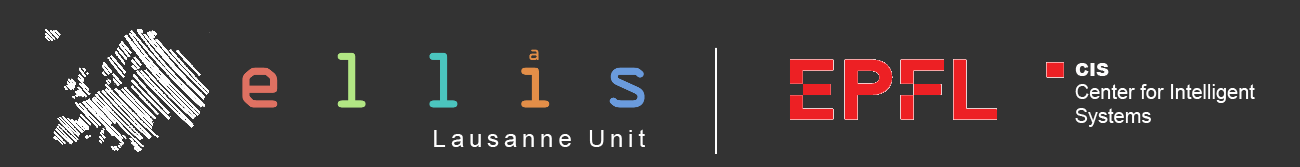
<style>
.page{position:relative;width:1300px;height:167px;background:#333333}
.page>*{position:absolute;margin:0}
.t1{font:18px "Arial-Black";color:#fdfcfc}
.t2{font:20px/24px "ArialMT";color:#ffffff}
.t3{font:24px "ArialMT";letter-spacing:0.2em;color:#ffffff}
</style>
<div class="page">
<p class="t1" style="left:1075px;top:63px;width:34px;height:13px">CIS</p>
<p class="t2" style="left:1075px;top:84px;width:180px;height:43px">Center for Intelligent<br>Systems</p>
<p class="t3" style="left:434px;top:129px;width:211px;height:18px">Lausanne Unit</p>
</div>
